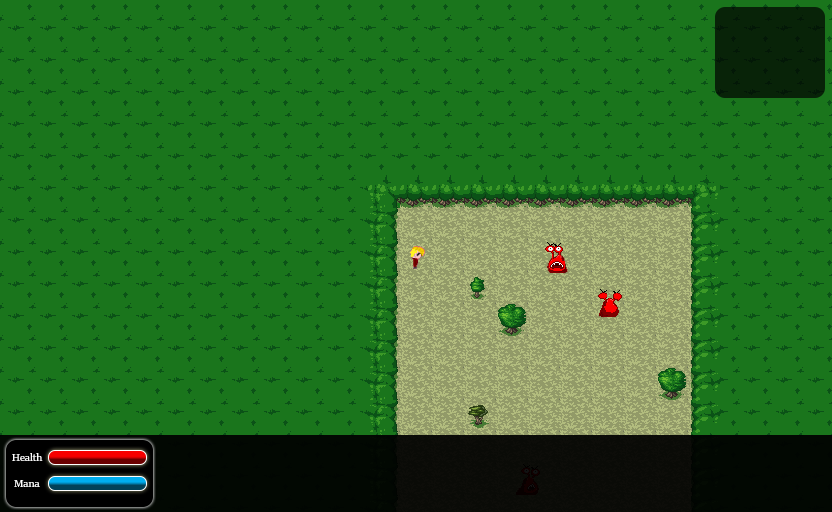
<style>
.page{position:relative;width:832px;height:512px;background:#1a751c}
.page>*{position:absolute;margin:0}
.t1{font:12px/13px "SitkaBanner";color:#fefefe}
</style>
<div class="page">
<p class="t1" style="left:12px;top:453px;width:31px;height:34px">Health<br><br>   Mana</p>
</div>
